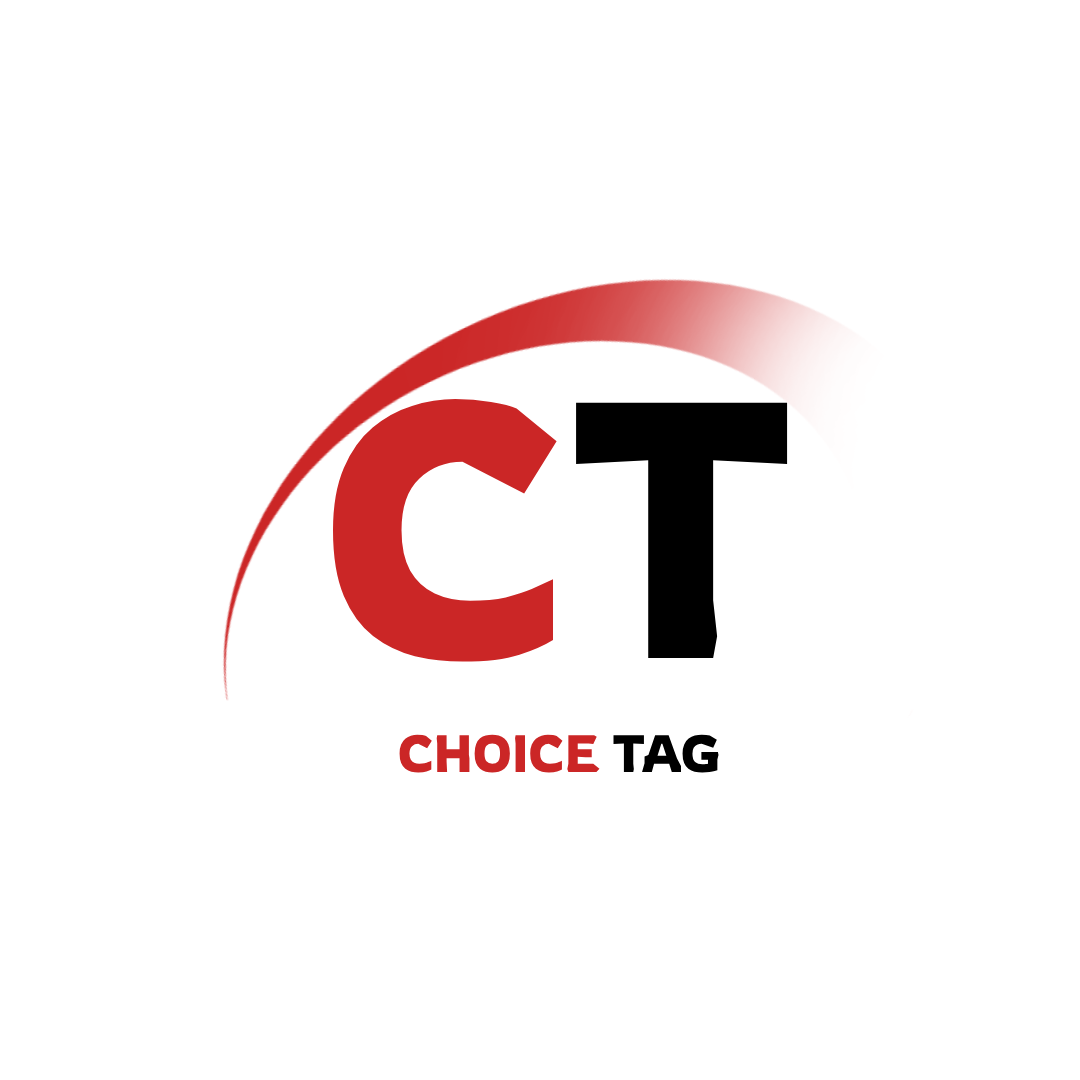
<style>
.page{position:relative;width:1080px;height:1080px;background:#ffffff}
.page>*{position:absolute;margin:0}
.t1{font:360.7px "Rowdies-Regular";color:#cb2626}
.t2{font:360.7px "Rowdies-Regular";color:#000000}
.t3{font:52px "Rowdies-Regular";color:#cb2626}
.t4{font:52px "Rowdies-Regular";color:#000000}
</style>
<div class="page">
<p class="t1" style="left:332px;top:399px;width:456px;height:263px">C<span class="t2">T</span></p>
<p class="t3" style="left:399px;top:734px;width:320px;height:39px">CHOICE <span class="t4">TAG</span></p>
</div>
